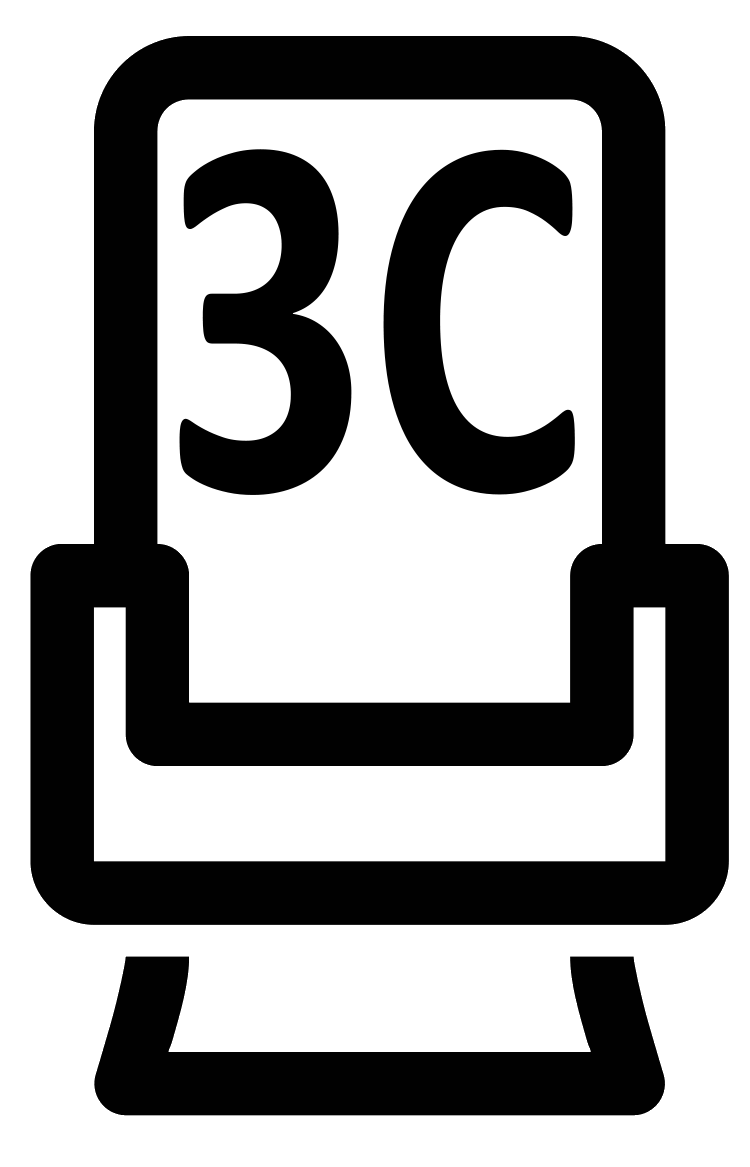
<style>
.page{position:relative;width:750px;height:1167px;background:#ffffff}
.page>*{position:absolute;margin:0}
.t1{font:528.2px "Calibri-Bold";color:#000000;scale:0.77 1}
</style>
<div class="page">
<p class="t1" style="left:179px;top:149px;width:396px;height:346px">3C</p>
</div>
